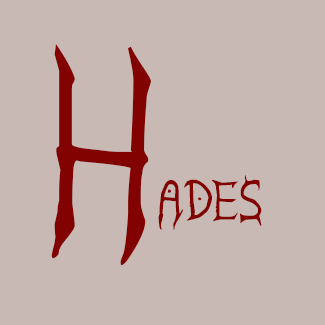
<style>
.page{position:relative;width:325px;height:325px;background:#c9b9b4}
.page>*{position:absolute;margin:0}
.t1{font:48px "SatanycDemoniacSt";color:#820202}
.t2{font:210px "SatanycDemoniacSt";color:#820202}
</style>
<div class="page">
<p class="t1" style="left:51px;top:44px;width:211px;height:222px"><span class="t2">H</span>ADES</p>
</div>
